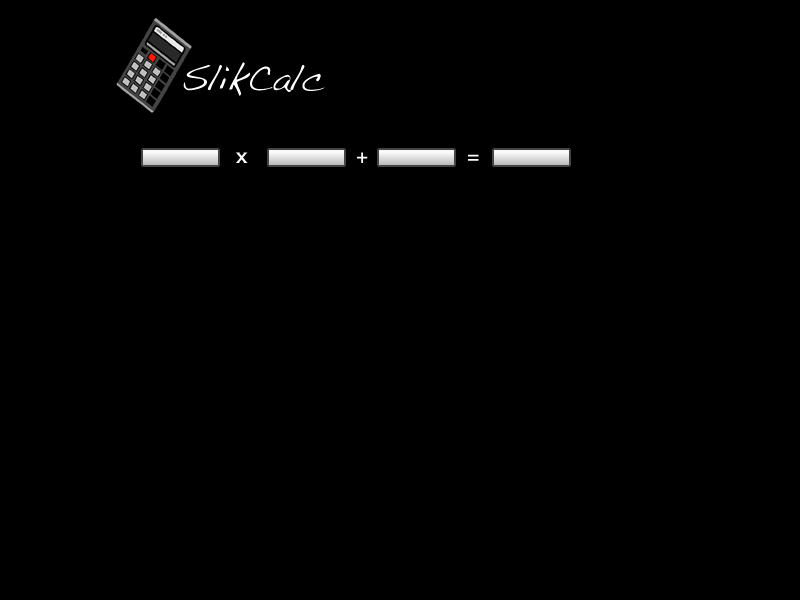
<style>
.page{position:relative;width:800px;height:600px;background:#000000}
.page>*{position:absolute;margin:0}
.t1{font:36px "Handwriting-Dakota";color:#ffffff}
.t2{font:24px "Copperplate";color:#ffffff}
</style>
<div class="page">
<p class="t1" style="left:183px;top:62px;width:142px;height:34px">SlikCalc</p>
<p class="t2" style="left:236px;top:152px;width:12px;height:11px">x</p>
<p class="t2" style="left:357px;top:152px;width:11px;height:11px">+</p>
<p class="t2" style="left:468px;top:154px;width:11px;height:7px">=</p>
</div>
